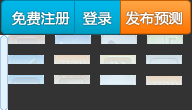
<style>
.page{position:relative;width:192px;height:110px;background:#333333}
.page>*{position:absolute;margin:0}
.t1{font:14px "MicrosoftYaHei";color:#ffffff;font-weight:bold}
</style>
<div class="page">
<p class="t1" style="left:12px;top:11px;width:171px;height:15px">免费注册   登录   发布预测</p>
</div>
